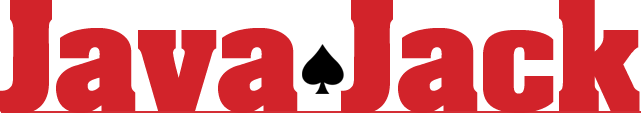
<style>
.page{position:relative;width:642px;height:113px;background:#d2232a}
.page>*{position:absolute;margin:0}
.t1{font:128.9px "AardvarkBold";color:#d2232a}
</style>
<div class="page">
<p class="t1" style="left:0px;top:0px;width:640px;height:113px">Java Jack</p>
</div>
